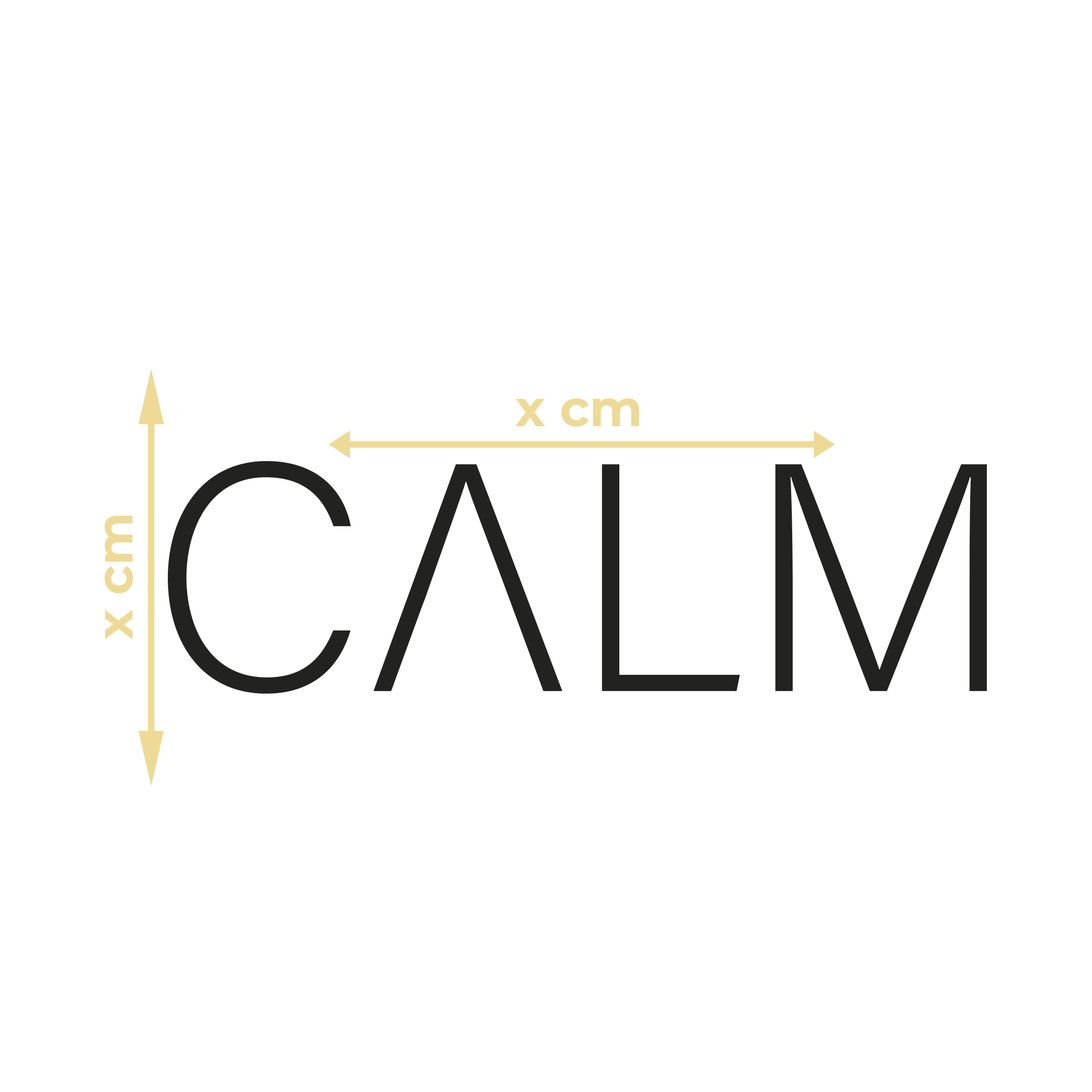
<style>
.page{position:relative;width:1092px;height:1092px;background:#ffffff}
.page>*{position:absolute;margin:0}
.t1{font:50.6px "Montserrat-Bold";color:#eeda96}
</style>
<div class="page">
<p class="t1" style="left:515px;top:398px;width:124px;height:29px">x cm</p>
<p class="t1" style="left:105px;top:516px;width:28px;height:124px;rotate:-90deg">x cm</p>
</div>
